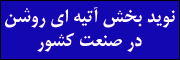
<style>
.page{position:relative;width:180px;height:60px;background:#1207b0}
.page>*{position:absolute;margin:0}
.t1{font:20px "BMitraBold";color:#fefffe}
</style>
<div class="page">
<p class="t1" style="left:5px;top:7px;width:170px;height:45px;text-align:center">نوید بخش آتیه ای روشن<br>در صنعت کشور</p>
</div>
